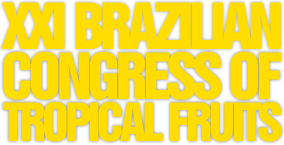
<style>
.page{position:relative;width:284px;height:145px;background:#ffdd00}
.page>*{position:absolute;margin:0}
.t1{font:58px "Swiss921BT-RegularA";letter-spacing:0.1em;color:#ffdd00;text-transform:uppercase}
.t2{font:48px "Swiss921BT-RegularA";letter-spacing:0.1em;color:#ffdd00;text-transform:uppercase}
</style>
<div class="page">
<p class="t1" style="left:1px;top:2px;width:280px;height:47px">XXIBRazilian</p>
<p class="t1" style="left:3px;top:51px;width:278px;height:49px">congressof</p>
<p class="t2" style="left:3px;top:101px;width:279px;height:41px">tropicalFRuits</p>
</div>
